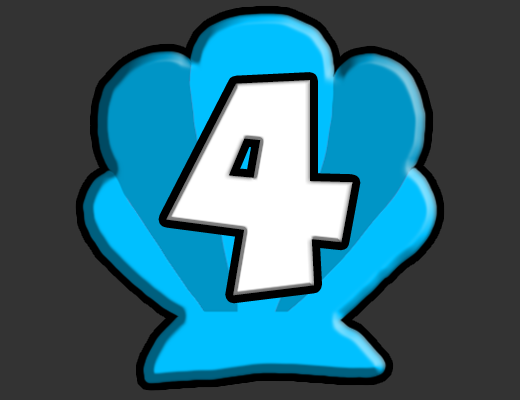
<style>
.page{position:relative;width:520px;height:400px;background:#333333}
.page>*{position:absolute;margin:0}
.t1{font:279.4px "Funhouse";color:#ffffff}
</style>
<div class="page">
<p class="t1" style="left:166px;top:80px;width:187px;height:216px">4</p>
</div>
